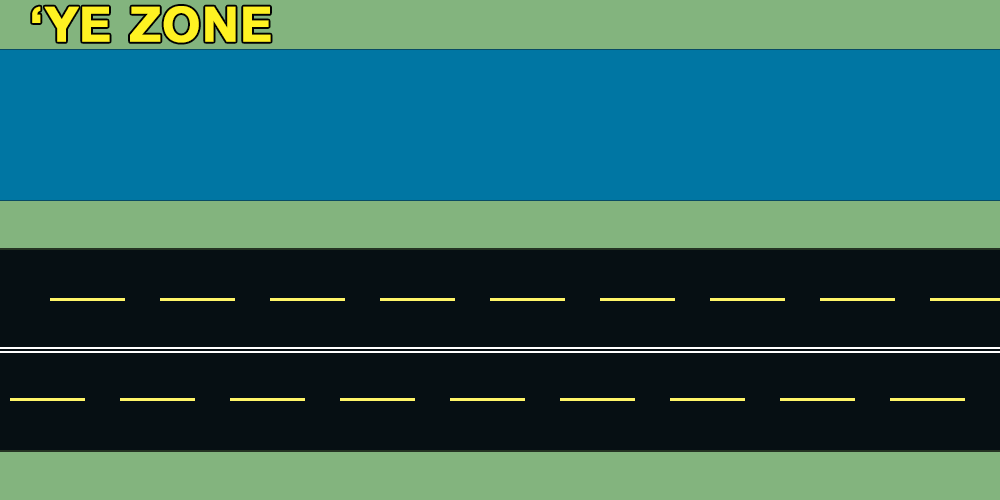
<style>
.page{position:relative;width:1000px;height:500px;background:#060f13}
.page>*{position:absolute;margin:0}
.t1{font:48px "HelveticaNeue-Bold";letter-spacing:0.025em;color:#fff222;font-weight:bold}
</style>
<div class="page">
<p class="t1" style="left:32px;top:6px;width:239px;height:37px">‘YE ZONE</p>
</div>
